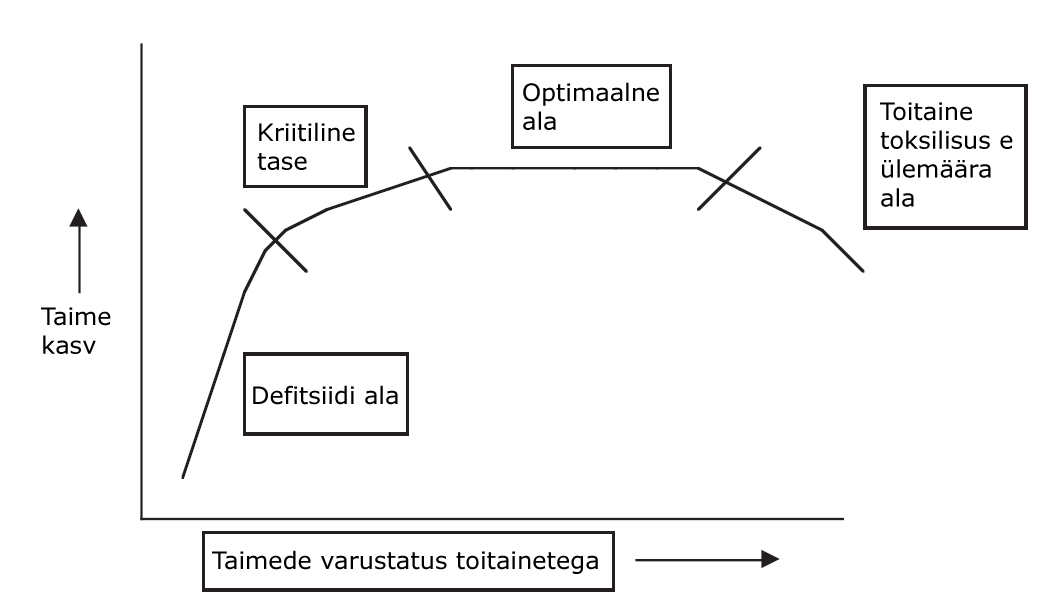
<style>
.page{position:relative;width:1060px;height:607px;background:#ffffff}
.page>*{position:absolute;margin:0}
.t1{font:24px "Verdana";color:#000000}
</style>
<div class="page">
<p class="t1" style="left:523px;top:82px;width:136px;height:48px">Optimaalne<br>ala</p>
<p class="t1" style="left:880px;top:102px;width:133px;height:105px">Toitaine <br>toksilisus e <br>ülemäära <br>ala</p>
<p class="t1" style="left:257px;top:122px;width:98px;height:48px">Kriitiline<br>tase</p>
<p class="t1" style="left:41px;top:307px;width:70px;height:47px">Taime<br>kasv</p>
<p class="t1" style="left:253px;top:385px;width:145px;height:20px">Defitsiidi ala</p>
<p class="t1" style="left:212px;top:550px;width:386px;height:24px">Taimede varustatus toitainetega</p>
</div>
